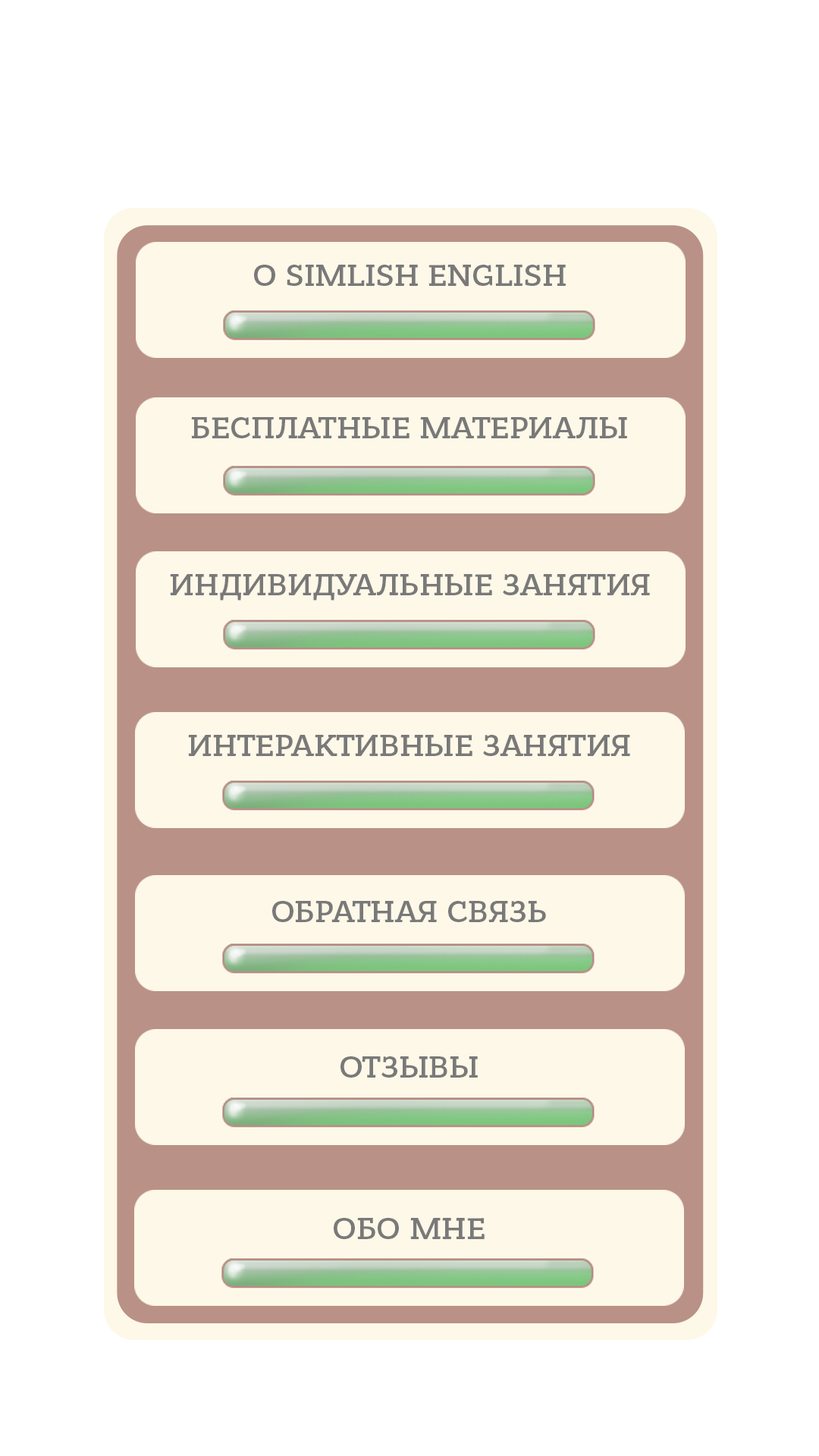
<style>
.page{position:relative;width:819px;height:1456px;background:#ffffff}
.page>*{position:absolute;margin:0}
.t1{font:31.6px "BanderaProMedium";color:#797979}
</style>
<div class="page">
<p class="t1" style="left:254px;top:265px;width:312px;height:22px">О SIMLISH ENGLISH</p>
<p class="t1" style="left:191px;top:416px;width:436px;height:22px">БЕСПЛАТНЫЕ МАТЕРИАЛЫ</p>
<p class="t1" style="left:170px;top:573px;width:480px;height:28px">ИНДИВИДУАЛЬНЫЕ ЗАНЯТИЯ</p>
<p class="t1" style="left:188px;top:734px;width:442px;height:22px">ИНТЕРАКТИВНЫЕ ЗАНЯТИЯ</p>
<p class="t1" style="left:272px;top:900px;width:274px;height:22px">ОБРАТНАЯ СВЯЗЬ</p>
<p class="t1" style="left:340px;top:1056px;width:138px;height:22px">ОТЗЫВЫ</p>
<p class="t1" style="left:334px;top:1217px;width:151px;height:22px">ОБО МНЕ</p>
</div>
